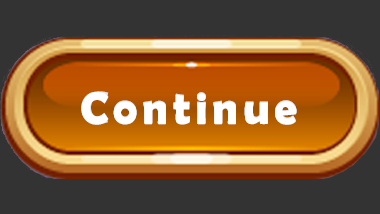
<style>
.page{position:relative;width:380px;height:214px;background:#333333}
.page>*{position:absolute;margin:0}
.t1{font:46px "BerlinSansFBDemi-Bold";letter-spacing:0.1em;color:#ffffff}
</style>
<div class="page">
<p class="t1" style="left:81px;top:91px;width:216px;height:34px">Continue</p>
</div>
